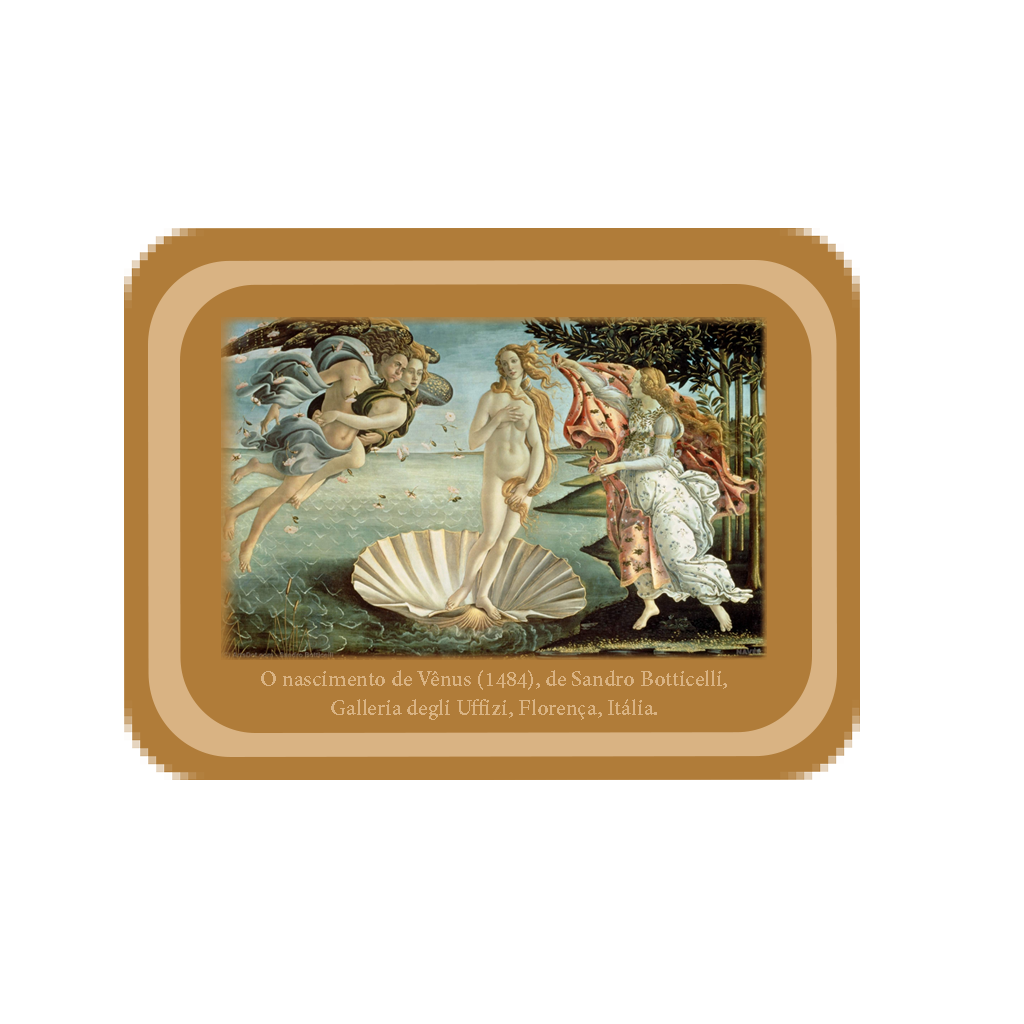
<style>
.page{position:relative;width:1024px;height:1024px;background:#ffffff}
.page>*{position:absolute;margin:0}
.t1{font:24.2px "AdobeDevanagari-Bold";color:#d9b383}
</style>
<div class="page">
<p class="t1" style="left:261px;top:670px;width:466px;height:50px;text-align:center">O nascimento de Vênus (1484), de Sandro Botticelli, Galleria degli Uffizi, Florença, Itália.</p>
</div>
